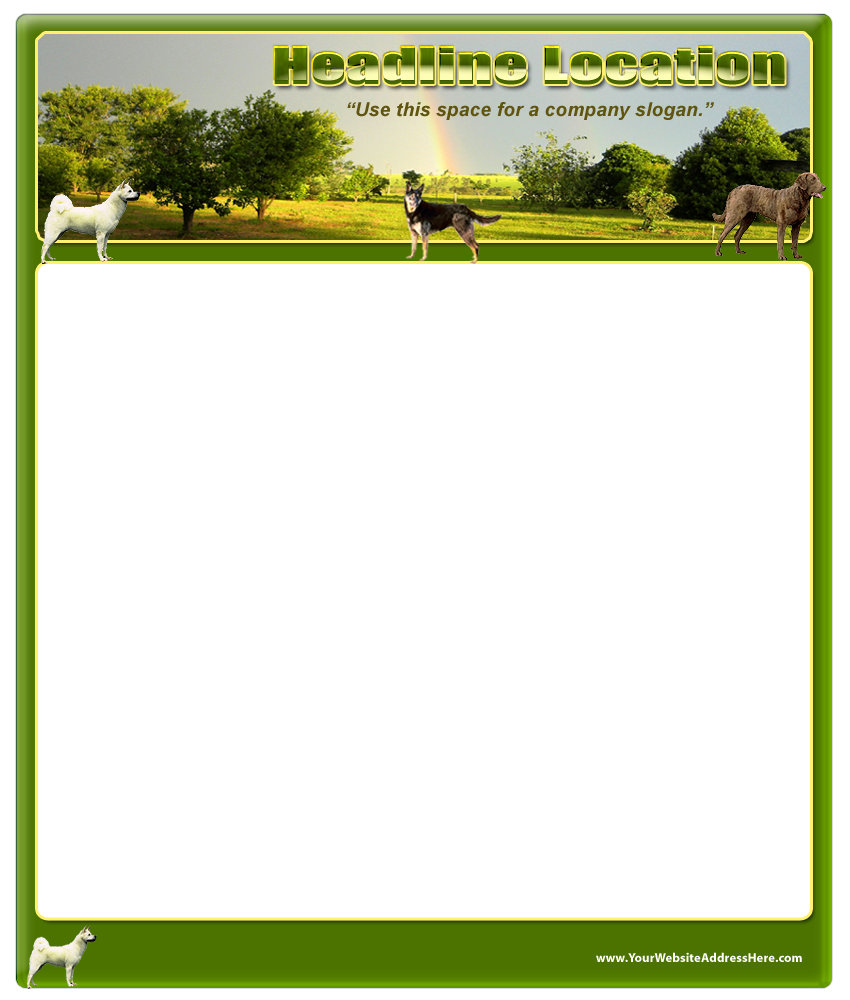
<style>
.page{position:relative;width:850px;height:1000px;background:#ffffff}
.page>*{position:absolute;margin:0}
.t1{font:43.3px "Impact";letter-spacing:0.01em;scale:1.59 1}
.t2{font:45.8px "Impact";letter-spacing:0.01em;scale:1.5 1}
.t3{font:19.1px "Arial-BoldItalicMT";letter-spacing:0.01em;color:#5f5510}
.t4{font:12.7px "Myriad-Bold";letter-spacing:0.01em;color:#ffffff}
</style>
<div class="page">
<p class="t1" style="left:273px;top:45px;width:512px;height:36px">Headline Location</p>
<p class="t2" style="left:274px;top:47px;width:511px;height:38px">Headline Location</p>
<p class="t3" style="left:347px;top:102px;width:367px;height:18px">“Use this space for a company slogan.”</p>
<p class="t4" style="left:596px;top:952px;width:206px;height:10px">www.YourWebsiteAddressHere.com</p>
</div>
